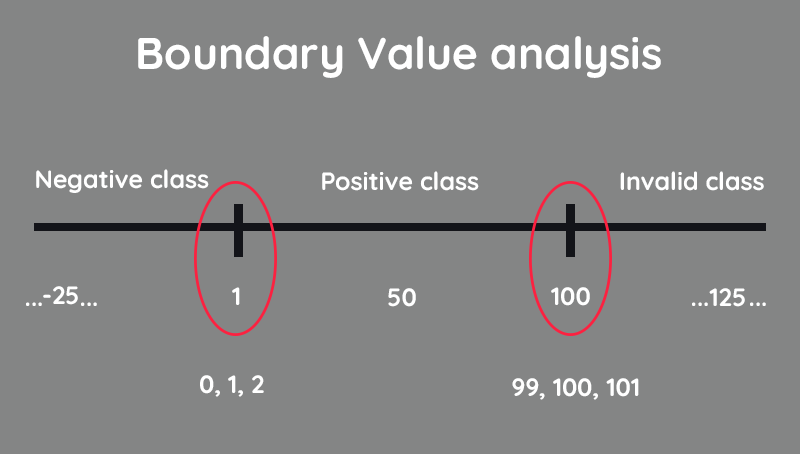
<style>
.page{position:relative;width:800px;height:454px;background:#848585}
.page>*{position:absolute;margin:0}
.t1{font:44.4px "Quicksand-Bold";color:#ffffff}
.t2{font:25px "Quicksand-Bold";color:#ffffff}
</style>
<div class="page">
<p class="t1" style="left:138px;top:36px;width:523px;height:42px">Boundary Value analysis</p>
<p class="t2" style="left:36px;top:169px;width:173px;height:24px">Negative class</p>
<p class="t2" style="left:322px;top:171px;width:157px;height:20px">Positive class</p>
<p class="t2" style="left:620px;top:171px;width:144px;height:20px">Invalid class</p>
<p class="t2" style="left:43px;top:286px;width:35px;height:19px">-25</p>
<p class="t2" style="left:232px;top:287px;width:8px;height:18px">1</p>
<p class="t2" style="left:388px;top:288px;width:28px;height:19px">50</p>
<p class="t2" style="left:551px;top:287px;width:39px;height:19px">100</p>
<p class="t2" style="left:709px;top:288px;width:36px;height:19px">125</p>
<p class="t2" style="left:26px;top:302px;width:16px;height:4px">...</p>
<p class="t2" style="left:81px;top:302px;width:16px;height:4px">...</p>
<p class="t2" style="left:692px;top:302px;width:16px;height:4px">...</p>
<p class="t2" style="left:750px;top:302px;width:16px;height:4px">...</p>
<p class="t2" style="left:200px;top:375px;width:64px;height:22px">0, 1, 2</p>
<p class="t2" style="left:512px;top:378px;width:127px;height:22px">99, 100, 101</p>
</div>
